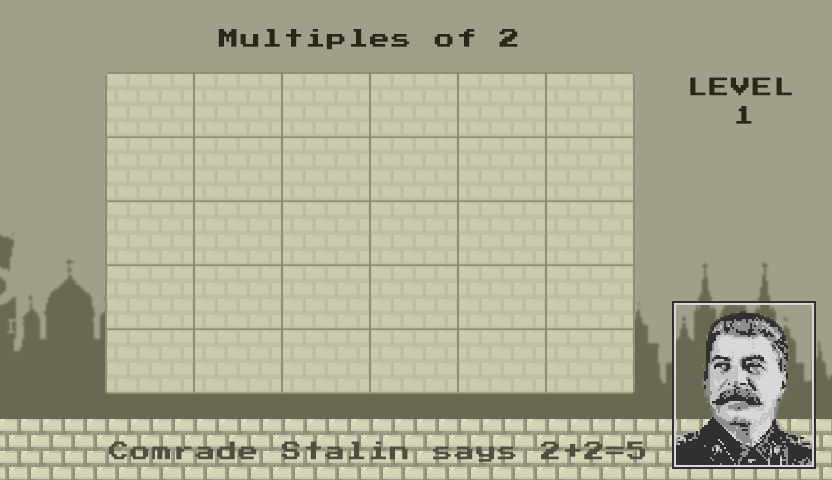
<style>
.page{position:relative;width:832px;height:480px;background:#a0a08a}
.page>*{position:absolute;margin:0}
.t1{font:20px "PressStart2P-Regular";letter-spacing:0.08em;color:#28281a}
.t2{font:20px "PressStart2P-Regular";letter-spacing:0.08em;color:#4f4f40}
</style>
<div class="page">
<p class="t1" style="left:218px;top:29px;width:300px;height:21px">Multiples of 2</p>
<p class="t1" style="left:690px;top:77px;width:102px;height:19px">LEVEL</p>
<p class="t1" style="left:736px;top:106px;width:16px;height:18px">1</p>
<p class="t2" style="left:109px;top:441px;width:536px;height:21px">Comrade Stalin says 2+2=5</p>
</div>
